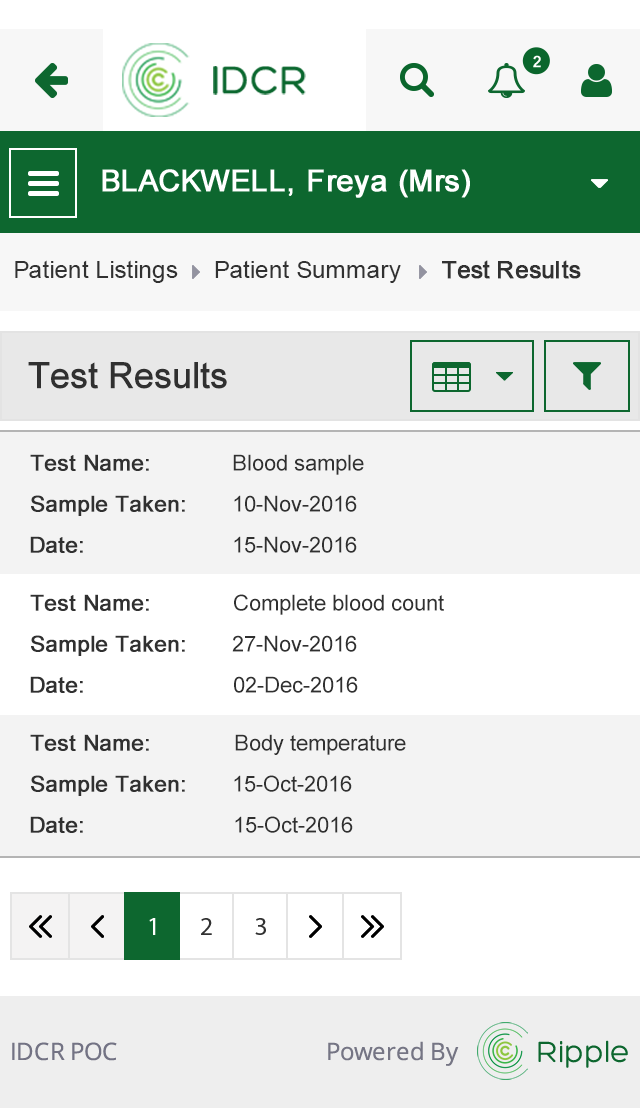
<style>
.page{position:relative;width:640px;height:1108px;background:#ffffff}
.page>*{position:absolute;margin:0}
.t1{font:24px "ArialMT";color:#313131}
.t2{font:24px "ArialMT";color:#313131;font-weight:bold}
.t3{font:36px "ArialMT";color:#303030;font-weight:bold}
.t4{font:22px "ArialMT";color:#303030;font-weight:bold}
.t5{font:22px "ArialMT";color:#303030}
</style>
<div class="page">
<p class="t1" style="left:15px;top:260px;width:163px;height:23px">Patient Listings</p>
<p class="t1" style="left:215px;top:260px;width:186px;height:23px">Patient Summary</p>
<p class="t2" style="left:442px;top:260px;width:139px;height:19px">Test Results</p>
<p class="t3" style="left:28px;top:362px;width:199px;height:27px">Test Results</p>
<p class="t4" style="left:30px;top:454px;width:119px;height:17px">Test Name:</p>
<p class="t5" style="left:233px;top:454px;width:131px;height:21px">Blood sample</p>
<p class="t4" style="left:31px;top:495px;width:154px;height:21px">Sample Taken:</p>
<p class="t5" style="left:234px;top:495px;width:123px;height:17px">10-Nov-2016</p>
<p class="t4" style="left:30px;top:536px;width:53px;height:17px">Date:</p>
<p class="t5" style="left:234px;top:536px;width:123px;height:17px">15-Nov-2016</p>
<p class="t4" style="left:30px;top:594px;width:119px;height:17px">Test Name:</p>
<p class="t5" style="left:234px;top:594px;width:210px;height:21px">Complete blood count</p>
<p class="t4" style="left:31px;top:635px;width:154px;height:21px">Sample Taken:</p>
<p class="t5" style="left:232px;top:635px;width:125px;height:17px">27-Nov-2016</p>
<p class="t4" style="left:30px;top:676px;width:53px;height:17px">Date:</p>
<p class="t5" style="left:234px;top:676px;width:124px;height:17px">02-Dec-2016</p>
<p class="t4" style="left:30px;top:734px;width:119px;height:17px">Test Name:</p>
<p class="t5" style="left:235px;top:734px;width:171px;height:21px">Body temperature</p>
<p class="t4" style="left:31px;top:775px;width:154px;height:21px">Sample Taken:</p>
<p class="t5" style="left:234px;top:775px;width:118px;height:17px">15-Oct-2016</p>
<p class="t4" style="left:30px;top:816px;width:53px;height:17px">Date:</p>
<p class="t5" style="left:235px;top:816px;width:118px;height:17px">15-Oct-2016</p>
</div>
